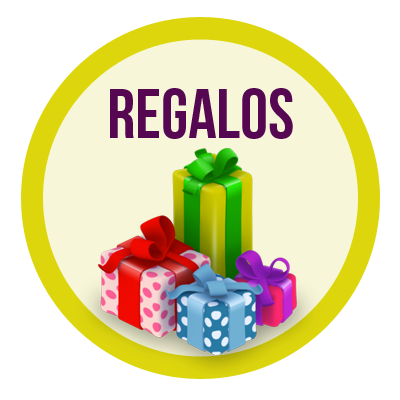
<style>
.page{position:relative;width:400px;height:400px;background:#ffffff}
.page>*{position:absolute;margin:0}
.t1{font:70px "BebasNeue";color:#560751}
</style>
<div class="page">
<p class="t1" style="left:110px;top:88px;width:183px;height:51px">regalos</p>
</div>
